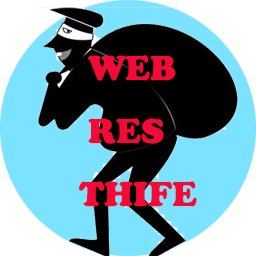
<style>
.page{position:relative;width:256px;height:256px;background:#7be2ff}
.page>*{position:absolute;margin:0}
.t1{font:35.9px "CooperBlack";color:#f50935}
</style>
<div class="page">
<p class="t1" style="left:79px;top:55px;width:118px;height:152px">WEB<br> RES<br>THIFE</p>
</div>
